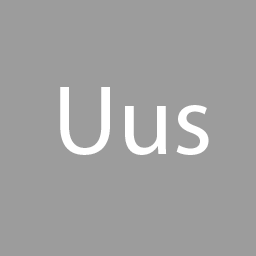
<style>
.page{position:relative;width:256px;height:256px;background:#9c9c9c}
.page>*{position:absolute;margin:0}
.t1{font:100px "MyriadPro-Regular";color:#ffffff}
</style>
<div class="page">
<p class="t1" style="left:60px;top:87px;width:149px;height:68px">Uus</p>
</div>
